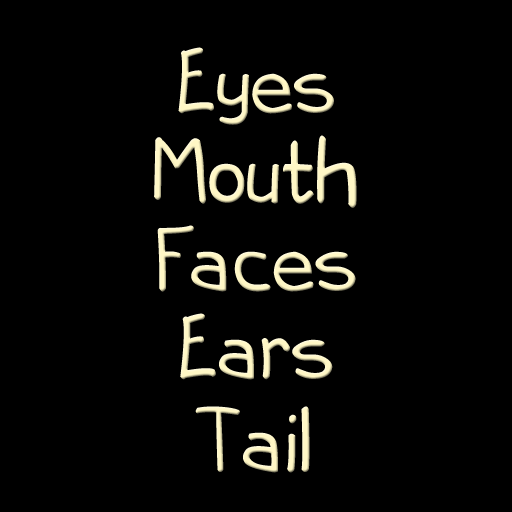
<style>
.page{position:relative;width:512px;height:512px;background:#000000}
.page>*{position:absolute;margin:0}
.t1{font:90px "steelcitycomic";color:#fff7c5}
</style>
<div class="page">
<p class="t1" style="left:178px;top:47px;width:156px;height:78px;text-align:center">Eyes<br>Mouth<br>Ears<br>Tail</p>
<p class="t1" style="left:154px;top:135px;width:203px;height:73px;text-align:center">Mouth<br>Mouth<br>Ears<br>Tail</p>
<p class="t1" style="left:157px;top:225px;width:199px;height:67px;text-align:center">Faces<br>Mouth<br>Ears<br>Tail</p>
<p class="t1" style="left:180px;top:313px;width:153px;height:67px;text-align:center">Ears<br>Mouth<br>Ears<br>Tail</p>
<p class="t1" style="left:195px;top:406px;width:115px;height:67px;text-align:center">Tail<br>Mouth<br>Ears<br>Tail</p>
</div>
